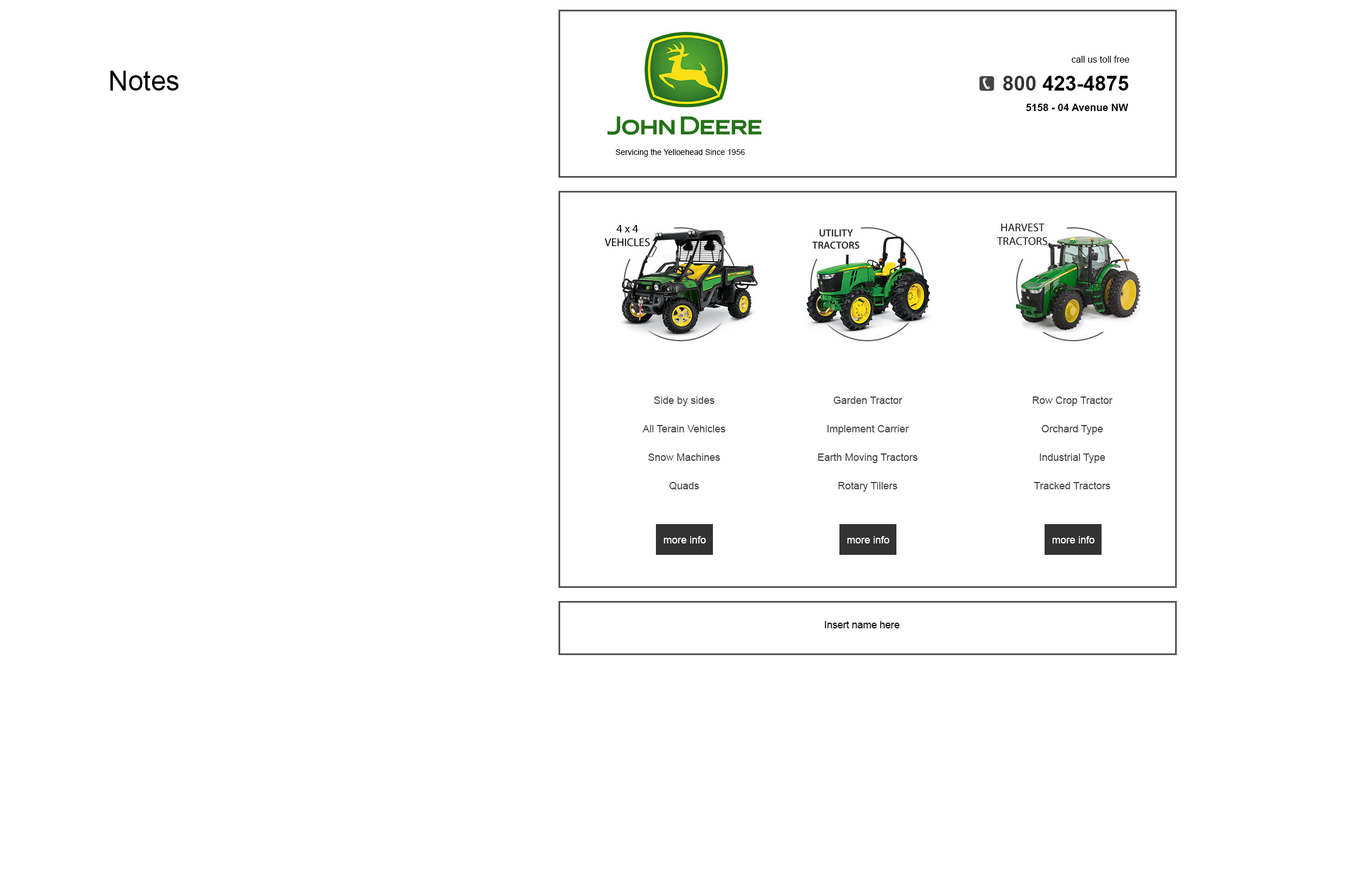
<style>
.page{position:relative;width:1362px;height:875px;background:#ffffff}
.page>*{position:absolute;margin:0}
.t1{font:9.1px "ArialMT";color:#000000}
.t2{font:27.4px "ArialMT";color:#000000}
.t3{font:20.5px "Arial-BoldMT";color:#000000}
.t4{font:20.5px "Arial-BoldMT";color:#333333}
.t5{font:10.3px "Arial-BoldMT";color:#000000}
.t6{font:8px "ArialMT";color:#000000}
.t7{font:10.4px/28.5px "ArialMT";color:#444444}
.t8{font:10.4px "ArialMT";color:#ffffff}
.t9{font:10.3px "ArialMT";color:#000000}
</style>
<div class="page">
<p class="t1" style="left:1071px;top:56px;width:59px;height:7px">call us toll free</p>
<p class="t2" style="left:110px;top:71px;width:69px;height:20px">Notes</p>
<p class="t3" style="left:1003px;top:76px;width:125px;height:15px"><span class="t4">800</span> 423-4875</p>
<p class="t5" style="left:1026px;top:104px;width:102px;height:7px">5158 - 04 Avenue NW</p>
<p class="t6" style="left:616px;top:149px;width:129px;height:8px">Servicing the Yelloehead Since 1956</p>
<p class="t7" style="left:642px;top:397px;width:84px;height:93px;text-align:center">Side by sides<br>All Terain Vehicles<br>Snow Machines<br>Quads</p>
<p class="t7" style="left:818px;top:397px;width:100px;height:95px;text-align:center">Garden Tractor<br>Implement Carrier<br>Earth Moving Tractors<br>Rotary Tillers</p>
<p class="t7" style="left:1033px;top:397px;width:80px;height:93px;text-align:center">Row Crop Tractor<br>Orchard Type<br>Industrial Type<br>Tracked Tractors</p>
<p class="t8" style="left:664px;top:536px;width:42px;height:8px">more info</p>
<p class="t8" style="left:847px;top:536px;width:43px;height:8px">more info</p>
<p class="t8" style="left:1053px;top:536px;width:42px;height:8px">more info</p>
<p class="t9" style="left:825px;top:621px;width:75px;height:8px">Insert name here</p>
</div>
